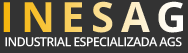
<style>
.page{position:relative;width:188px;height:53px;background:#333333}
.page>*{position:absolute;margin:0}
.t1{font:41.7px "OpenSans-Bold";letter-spacing:-0.05em}
.t2{font:12.5px "OpenSans-Semibold";letter-spacing:-0.05em;color:#ffffff}
</style>
<div class="page">
<p class="t1" style="left:3px;top:1px;width:180px;height:32px">I N E S A G</p>
<p class="t2" style="left:5px;top:37px;width:177px;height:10px">INDUSTRIAL ESPECIALIZADA AGS</p>
</div>
